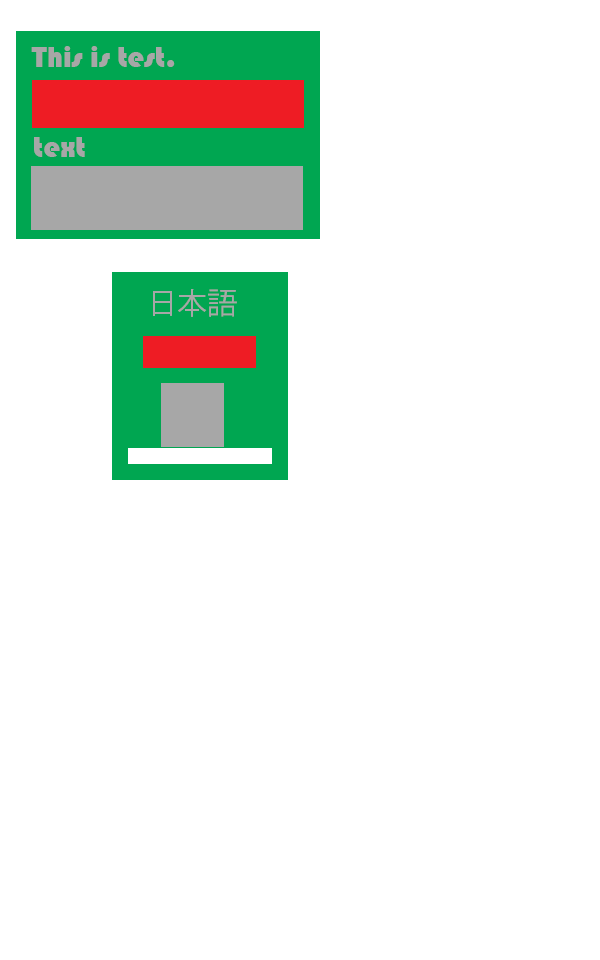
<style>
.page{position:relative;width:600px;height:960px;background:#ffffff}
.page>*{position:absolute;margin:0}
.t1{font:30px "Bauhaus93";color:#a7a7a7}
.t2{font:30px "KozGoPr6N-Regular";color:#a7a7a7}
</style>
<div class="page">
<p class="t1" style="left:31px;top:46px;width:144px;height:21px">This is test.</p>
<p class="t1" style="left:34px;top:137px;width:51px;height:20px">text</p>
<p class="t2" style="left:153px;top:289px;width:84px;height:28px">日本語</p>
</div>
